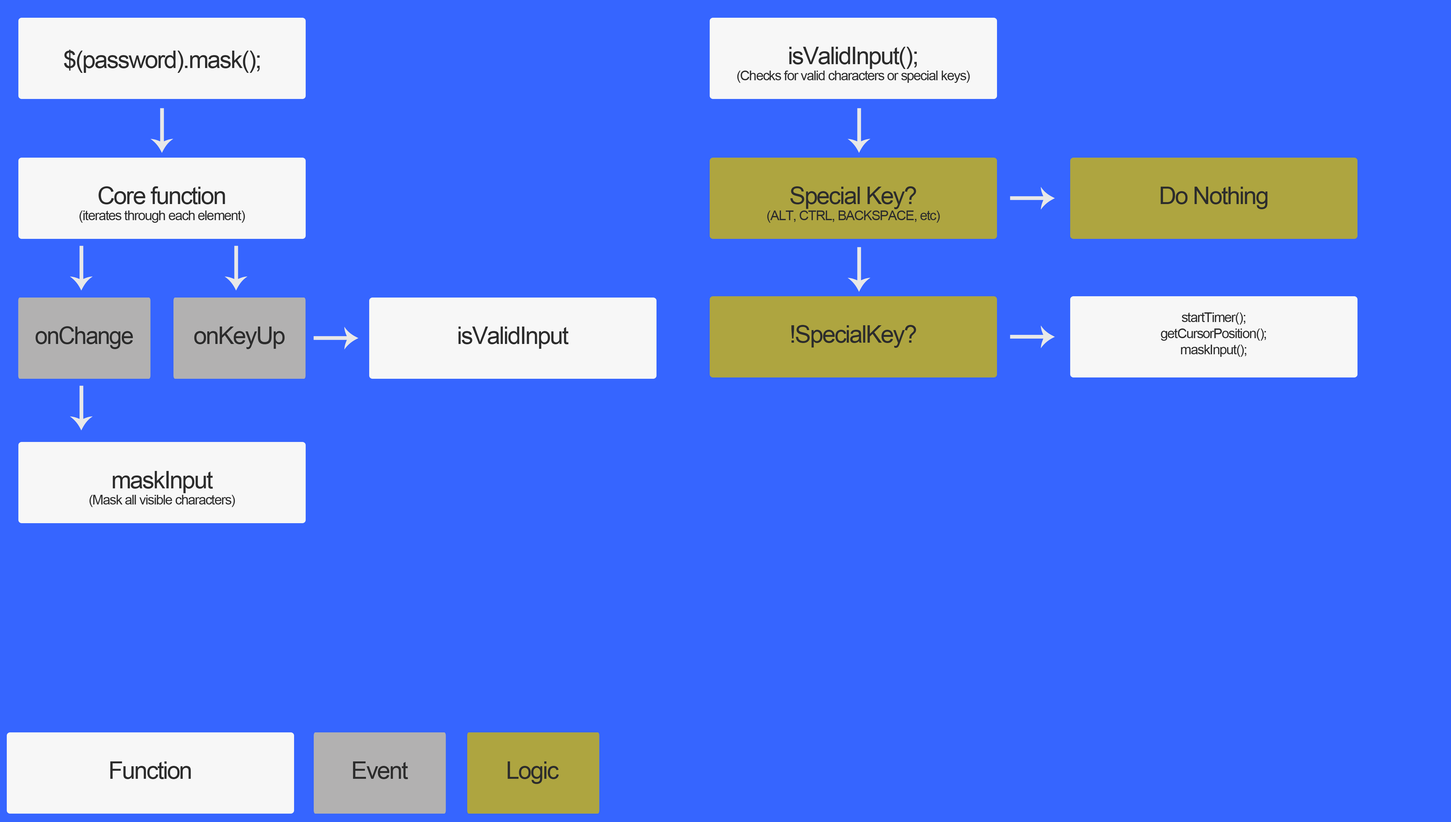
<style>
.page{position:relative;width:1451px;height:822px;background:#3665ff}
.page>*{position:absolute;margin:0}
.t1{font:24.2px "ArialMT";letter-spacing:-0.05em;color:#2c2c2c}
.t2{font:13.4px "ArialMT";letter-spacing:-0.05em;color:#2c2c2c}
.t3{font:24.2px "ArialMT";letter-spacing:-0.05em;color:#2c2c2c;scale:0.96 1}
</style>
<div class="page">
<p class="t1" style="left:64px;top:50px;width:196px;height:23px">$(password).mask();</p>
<p class="t2" style="left:737px;top:47px;width:233px;height:36px;text-align:center"><span class="t1"><br>isValidInput();<br></span>(Checks for valid characters or special keys)</p>
<p class="t2" style="left:79px;top:186px;width:166px;height:37px;text-align:center"><span class="t1"><br>Core function<br></span>(iterates through each element)</p>
<p class="t2" style="left:767px;top:186px;width:173px;height:37px;text-align:center"><span class="t1"><br>Special Key?<br></span>(ALT, CTRL, BACKSPACE, etc)</p>
<p class="t1" style="left:1160px;top:187px;width:107px;height:22px">Do Nothing</p>
<p class="t2" style="left:1160px;top:312px;width:106px;height:45px;text-align:center">startTimer();<br>getCursorPosition();<br>maskInput();</p>
<p class="t3" style="left:35px;top:326px;width:98px;height:23px">onChange</p>
<p class="t1" style="left:194px;top:327px;width:91px;height:22px">onKeyUp</p>
<p class="t1" style="left:458px;top:327px;width:111px;height:22px">isValidInput</p>
<p class="t1" style="left:791px;top:325px;width:125px;height:23px">!SpecialKey?</p>
<p class="t2" style="left:89px;top:471px;width:146px;height:36px;text-align:center"><span class="t1"><br>maskInput<br></span>(Mask all visible characters)</p>
<p class="t1" style="left:110px;top:761px;width:81px;height:18px">Function</p>
<p class="t1" style="left:353px;top:761px;width:55px;height:18px">Event</p>
<p class="t1" style="left:507px;top:761px;width:52px;height:23px">Logic</p>
</div>
